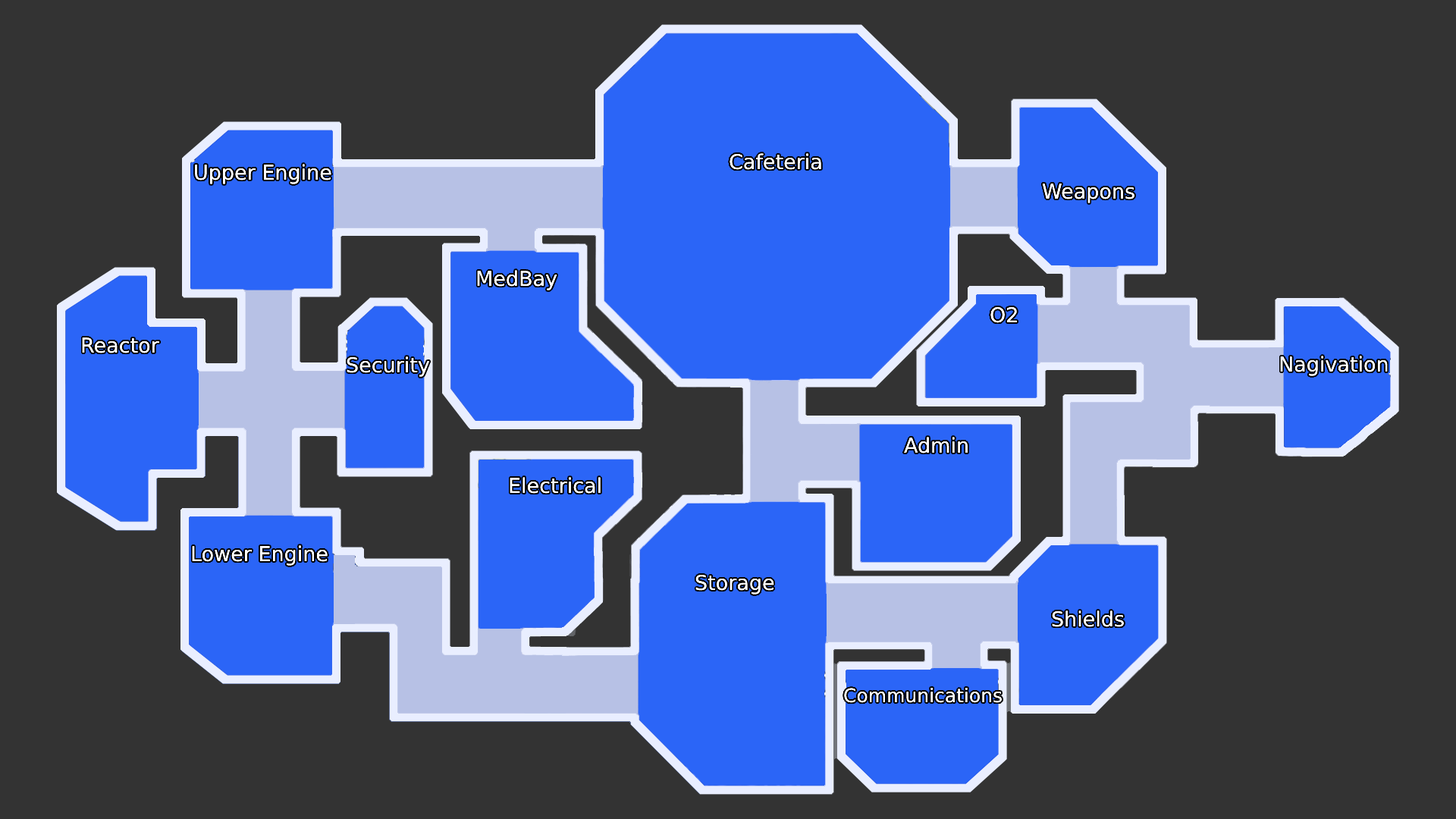
<style>
.page{position:relative;width:1456px;height:819px;background:#333333}
.page>*{position:absolute;margin:0}
.t1{font:20.5px "DejaVuSans";color:#ffffff}
.t2{font:19px "DejaVuSans";color:#ffffff}
</style>
<div class="page">
<p class="t1" style="left:730px;top:153px;width:91px;height:17px">Cafeteria</p>
<p class="t1" style="left:195px;top:164px;width:136px;height:20px">Upper Engine</p>
<p class="t1" style="left:1042px;top:184px;width:92px;height:19px">Weapons</p>
<p class="t1" style="left:477px;top:270px;width:80px;height:20px">MedBay</p>
<p class="t1" style="left:990px;top:306px;width:27px;height:17px">O2</p>
<p class="t1" style="left:82px;top:337px;width:77px;height:16px">Reactor</p>
<p class="t1" style="left:347px;top:356px;width:83px;height:21px">Security</p>
<p class="t1" style="left:1280px;top:356px;width:108px;height:20px">Nagivation</p>
<p class="t1" style="left:904px;top:437px;width:64px;height:16px">Admin</p>
<p class="t1" style="left:510px;top:477px;width:91px;height:17px">Electrical</p>
<p class="t1" style="left:192px;top:545px;width:136px;height:21px">Lower Engine</p>
<p class="t1" style="left:695px;top:574px;width:79px;height:21px">Storage</p>
<p class="t1" style="left:1052px;top:610px;width:72px;height:17px">Shields</p>
<p class="t2" style="left:844px;top:688px;width:158px;height:15px">Communications</p>
</div>
